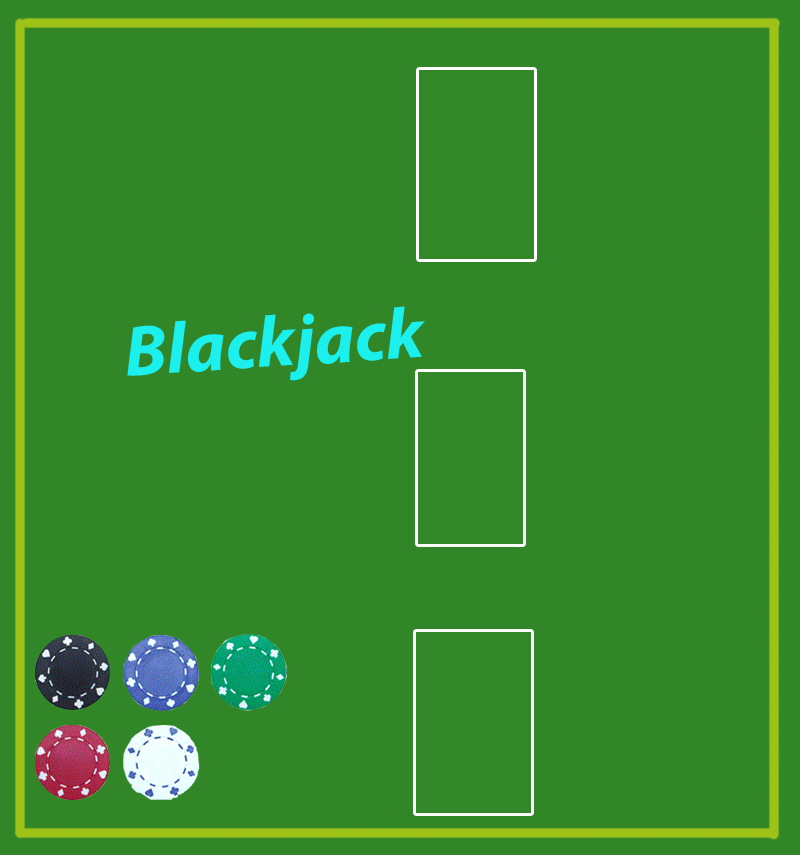
<style>
.page{position:relative;width:800px;height:855px;background:#318727}
.page>*{position:absolute;margin:0}
.t1{font:72px "MyriadPro-BoldIt";color:#13f0ec}
</style>
<div class="page">
<p class="t1" style="left:127px;top:306px;width:298px;height:75px;rotate:-4deg">Blackjack</p>
</div>
